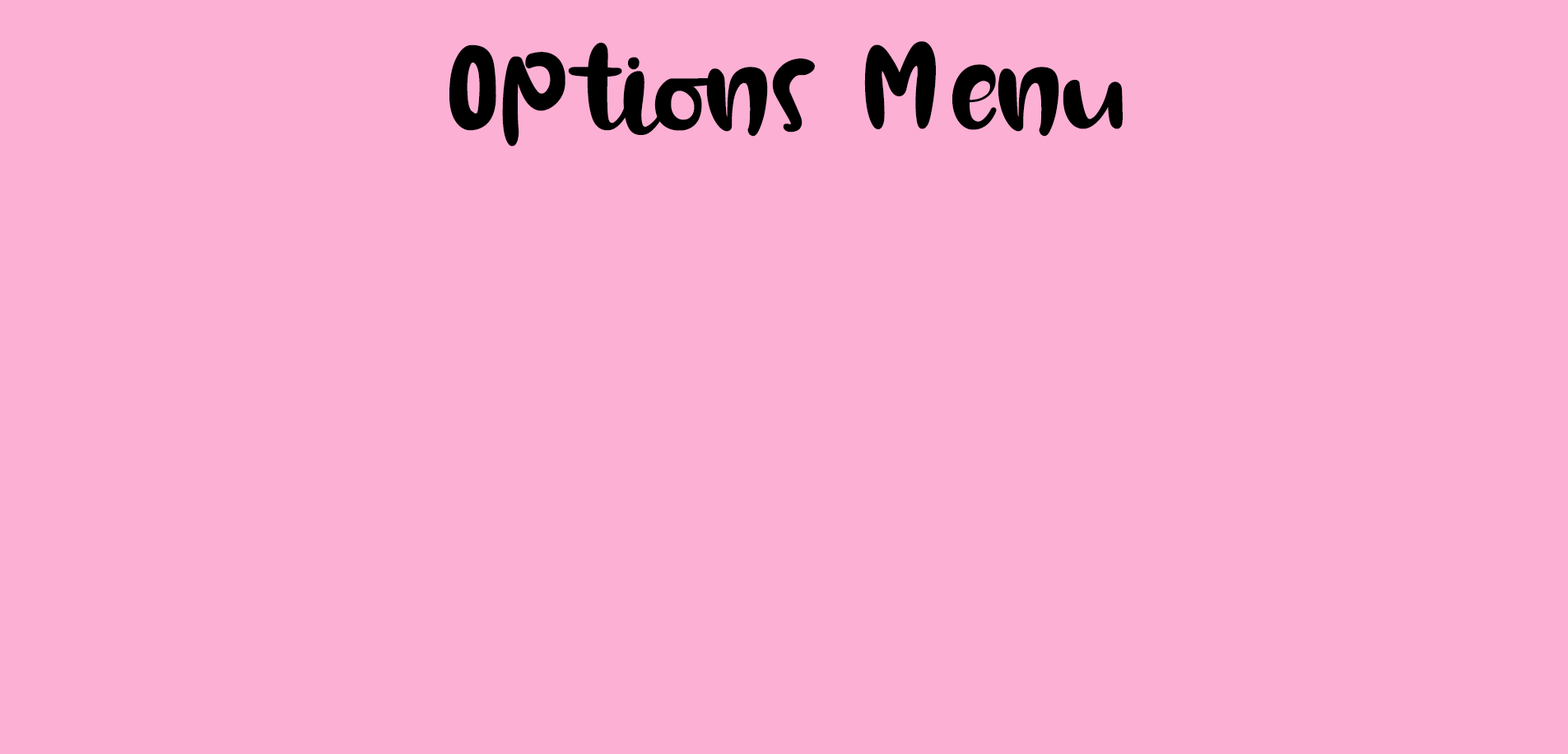
<style>
.page{position:relative;width:1568px;height:754px;background:#fcb0d4}
.page>*{position:absolute;margin:0}
.t1{font:164.6px "ChocolateRegular";color:#000000}
</style>
<div class="page">
<p class="t1" style="left:449px;top:41px;width:674px;height:106px">Options Menu</p>
</div>
